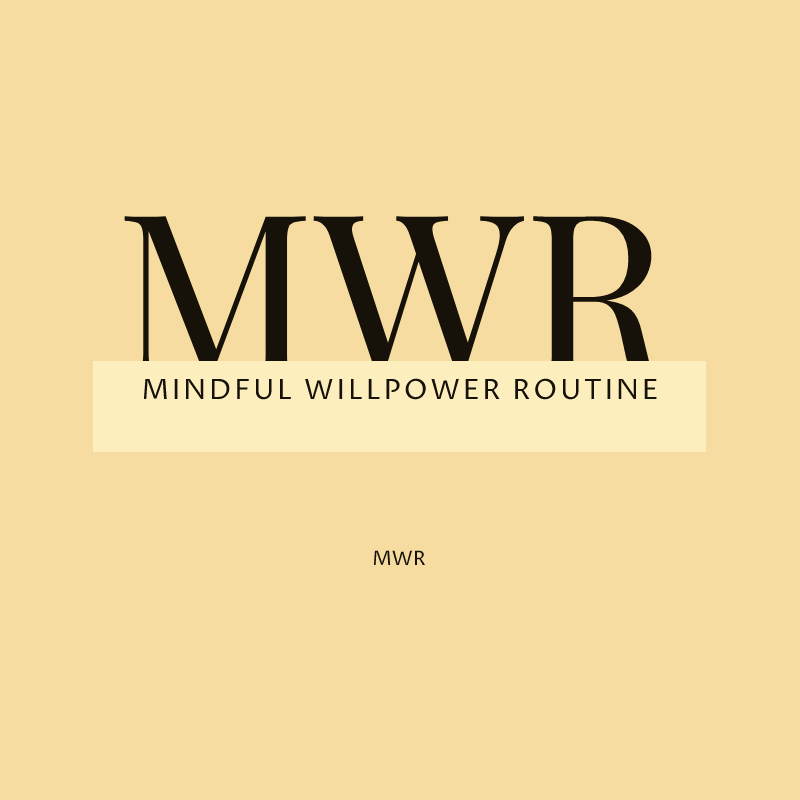
<style>
.page{position:relative;width:800px;height:800px;background:#f6dca0}
.page>*{position:absolute;margin:0}
.t1{font:230px "PlayfairDisplaySC-Regular";color:#161209}
.t2{font:230px "PlayfairDisplaySC-Regular";color:#fceebd}
.t3{font:28px "ProzaLibre-Regular";letter-spacing:0.1em;color:#161209}
.t4{font:20px "ProzaLibre-Regular";color:#161209}
</style>
<div class="page">
<p class="t1" style="left:124px;top:216px;width:552px;height:167px"><span class="t2">M</span>WR</p>
<p class="t3" style="left:143px;top:378px;width:514px;height:22px">MINDFUL WILLPOWER ROUTINE</p>
<p class="t4" style="left:373px;top:550px;width:53px;height:15px">MWR</p>
</div>
